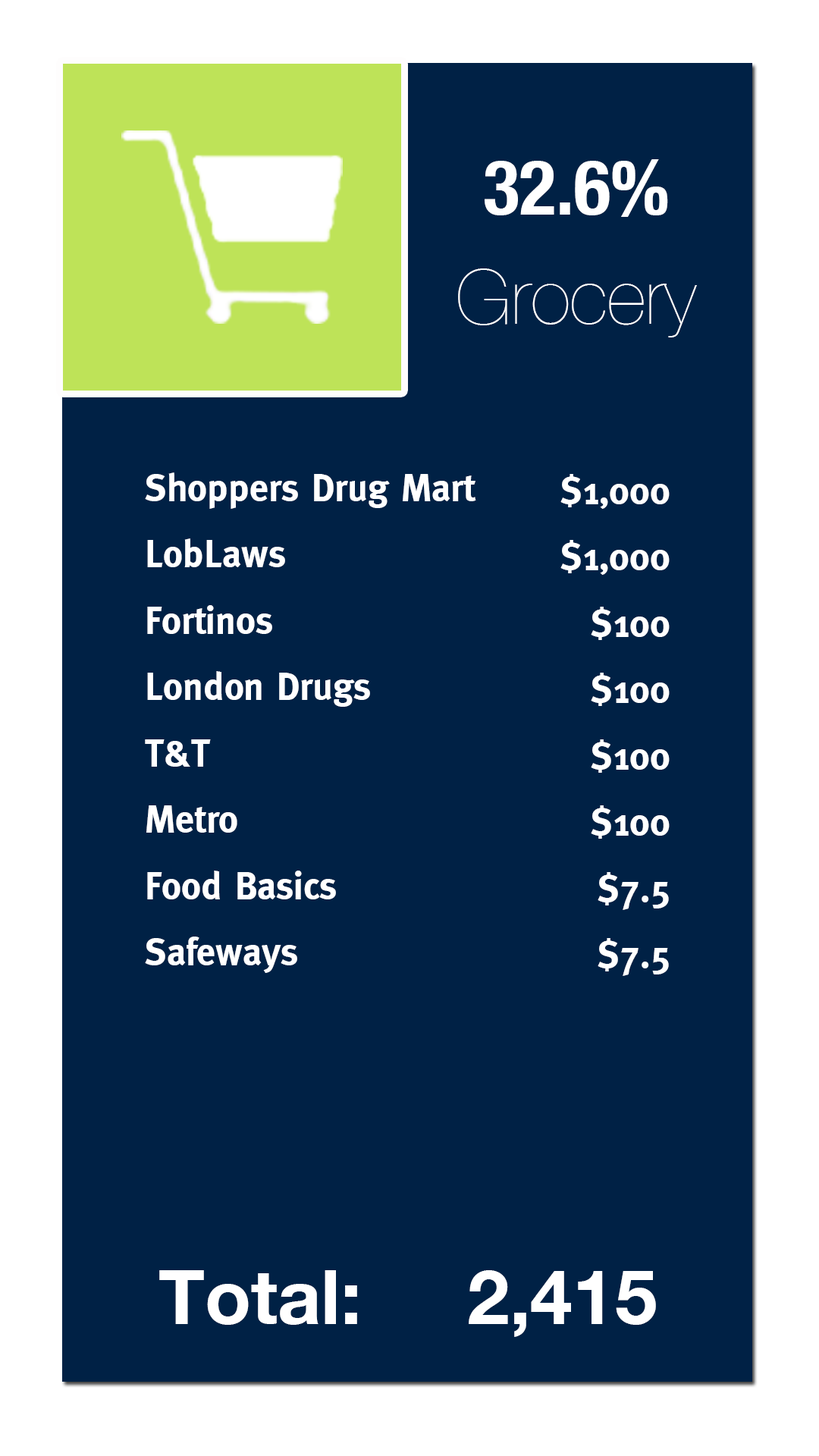
<style>
.page{position:relative;width:819px;height:1456px;background:#002145}
.page>*{position:absolute;margin:0}
.t1{font:75.8px/18.2px "HelveticaNeue-UltraLight";color:#ffffff}
.t2{font:75.8px/18.2px "HelveticaNeue-CondensedBold";color:#ffffff}
.t3{font:37.9px "MetaBold";color:#ffffff}
.t4{font:75.8px "HelveticaNeue-Bold";color:#ffffff}
</style>
<div class="page">
<p class="t1" style="left:458px;top:159px;width:239px;height:178px;text-align:center"><span class="t2">32.6%<br><br><br><br><br><br></span>Grocery</p>
<p class="t3" style="left:145px;top:472px;width:331px;height:501px">Shoppers Drug Mart<br>LobLaws<br>Fortinos<br>London Drugs<br>T&amp;T<br>Metro<br>Food Basics<br>Safeways</p>
<p class="t3" style="left:560px;top:474px;width:110px;height:502px;text-align:right">$1,000<br>$1,000<br>$100<br>$100<br>$100<br>$100<br>$7.5<br>$7.5</p>
<p class="t4" style="left:159px;top:1270px;width:497px;height:67px">Total:     2,415</p>
</div>
